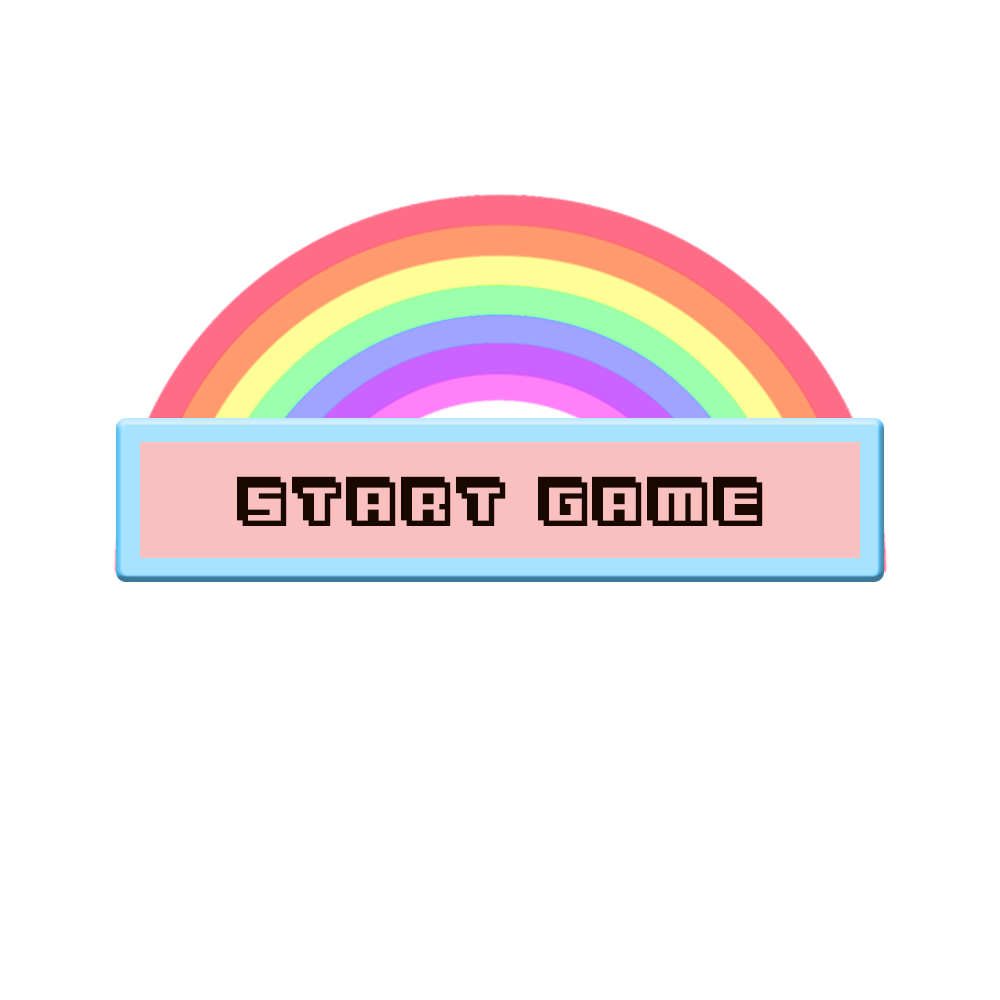
<style>
.page{position:relative;width:1000px;height:1000px;background:#ffffff}
.page>*{position:absolute;margin:0}
.t1{font:87.5px "3Dventure";color:#130a06}
</style>
<div class="page">
<p class="t1" style="left:237px;top:476px;width:526px;height:50px">Start Game</p>
</div>
